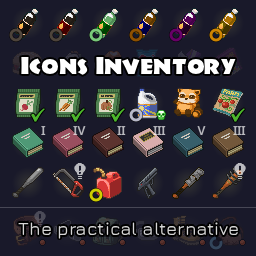
<style>
.page{position:relative;width:256px;height:256px;background:#19192a}
.page>*{position:absolute;margin:0}
.t1{font:24px "JungleFever";color:#ffffff}
.t2{font:18px "Jura-SemiBold";color:#d6d6d6}
</style>
<div class="page">
<p class="t1" style="left:21px;top:56px;width:215px;height:19px">Icons Inventory</p>
<p class="t2" style="left:18px;top:222px;width:220px;height:17px">The practical alternative</p>
</div>
